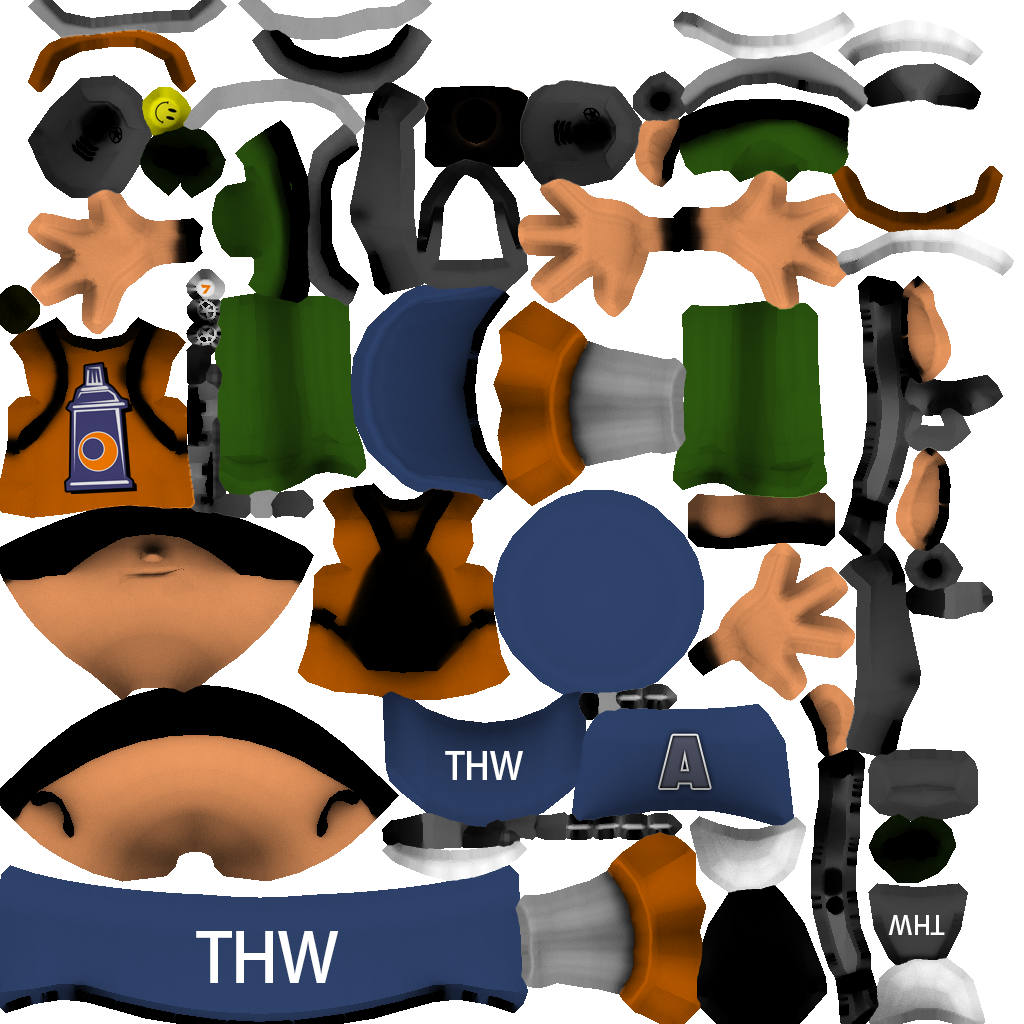
<style>
.page{position:relative;width:1024px;height:1024px;background:#ffffff}
.page>*{position:absolute;margin:0}
.t1{font:72px "AMCAPEternal";letter-spacing:-0.01em;color:#3f4250}
.t2{font:37px "TimesNewRomanPSMT";letter-spacing:-0.014em;color:#ffffff;text-transform:uppercase}
.t3{font:26px "TimesNewRomanPSMT";letter-spacing:-0.014em;color:#ffffff;text-transform:uppercase}
.t4{font:67.5px "TimesNewRomanPSMT";letter-spacing:-0.014em;color:#ffffff;text-transform:uppercase}
</style>
<div class="page">
<p class="t1" style="left:659px;top:735px;width:51px;height:53px">A</p>
<p class="t2" style="left:445px;top:751px;width:78px;height:29px">THW</p>
<p class="t3" style="left:888px;top:915px;width:57px;height:20px;rotate:-180deg">THW</p>
<p class="t4" style="left:196px;top:931px;width:143px;height:52px">THW</p>
</div>
